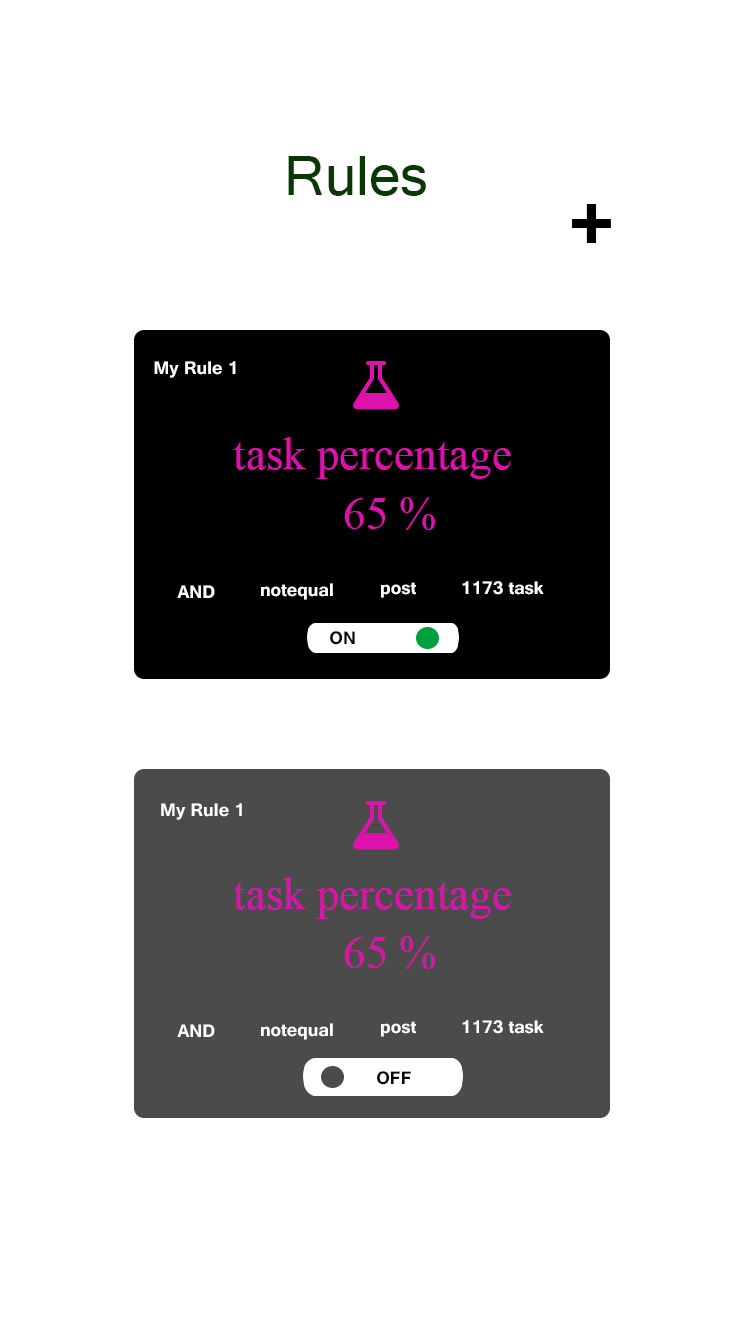
<style>
.page{position:relative;width:750px;height:1334px;background:#ffffff}
.page>*{position:absolute;margin:0}
.t1{font:72px "Tunga";color:#093803}
.t2{font:103.1px "Tunga-Bold";color:#000000}
.t3{font:22.5px "Tunga-Bold";color:#ffffff}
.t4{font:45px "TimesNewRomanPSMT";color:#df11ac}
.t5{font:22.5px "Tunga-Bold";color:#0b060a}
</style>
<div class="page">
<p class="t1" style="left:288px;top:156px;width:138px;height:40px">Rules</p>
<p class="t2" style="left:572px;top:204px;width:39px;height:39px">+</p>
<p class="t3" style="left:154px;top:361px;width:82px;height:17px">My Rule 1</p>
<p class="t4" style="left:233px;top:437px;width:278px;height:42px">task percentage</p>
<p class="t4" style="left:344px;top:497px;width:91px;height:33px">65 %</p>
<p class="t3" style="left:381px;top:582px;width:35px;height:16px">post</p>
<p class="t3" style="left:462px;top:581px;width:82px;height:14px">1173 task</p>
<p class="t3" style="left:177px;top:585px;width:38px;height:13px">AND</p>
<p class="t3" style="left:261px;top:583px;width:72px;height:17px">notequal</p>
<p class="t5" style="left:330px;top:631px;width:25px;height:14px">ON</p>
<p class="t3" style="left:161px;top:803px;width:81px;height:17px">My Rule 1</p>
<p class="t4" style="left:233px;top:877px;width:278px;height:42px">task percentage</p>
<p class="t4" style="left:344px;top:936px;width:91px;height:33px">65 %</p>
<p class="t3" style="left:177px;top:1024px;width:38px;height:13px">AND</p>
<p class="t3" style="left:261px;top:1023px;width:72px;height:17px">notequal</p>
<p class="t3" style="left:381px;top:1021px;width:35px;height:16px">post</p>
<p class="t3" style="left:462px;top:1020px;width:82px;height:14px">1173 task</p>
<p class="t5" style="left:377px;top:1071px;width:34px;height:14px">OFF</p>
</div>
